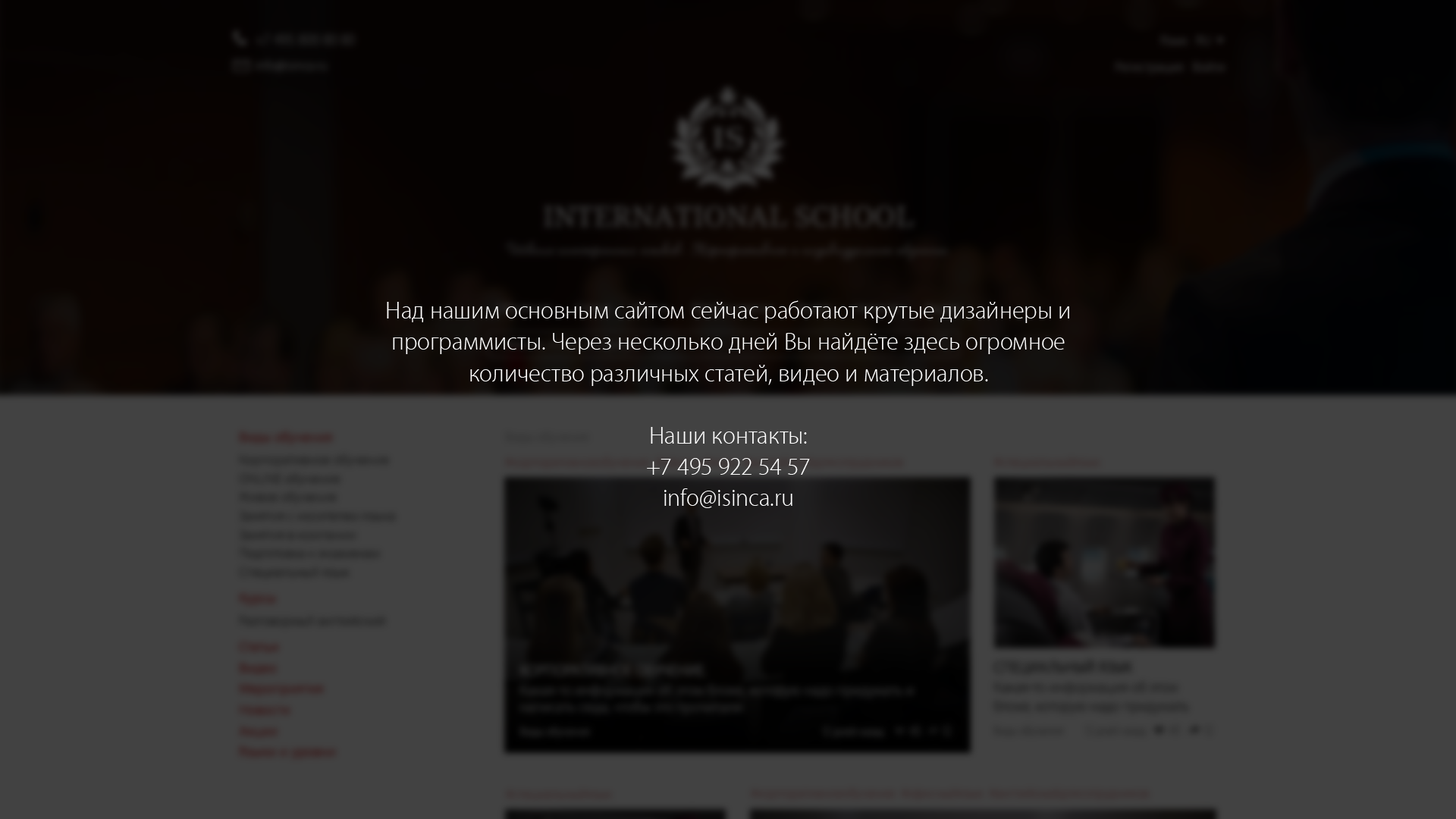
<style>
.page{position:relative;width:1456px;height:819px;background:#424242}
.page>*{position:absolute;margin:0}
.t1{font:25px/31.2px "MyriadSetPro-Thin";color:#ffffff}
</style>
<div class="page">
<p class="t1" style="left:387px;top:300px;width:682px;height:208px;text-align:center">Над нашим основным сайтом сейчас работают крутые дизайнеры и программисты. Через несколько дней Вы найдёте здесь огромное количество различных статей, видео и материалов.<br><br>Наши контакты:<br>+7 495 922 54 57<br>info@isinca.ru</p>
</div>
